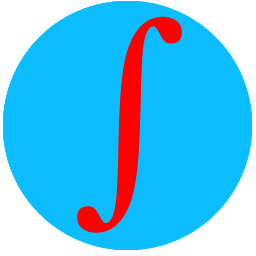
<style>
.page{position:relative;width:256px;height:256px;background:#0bbdff}
.page>*{position:absolute;margin:0}
.t1{font:230px "MonaLisaSolidITCTT";color:#ff0000}
</style>
<div class="page">
<p class="t1" style="left:77px;top:16px;width:105px;height:217px">∫</p>
</div>
